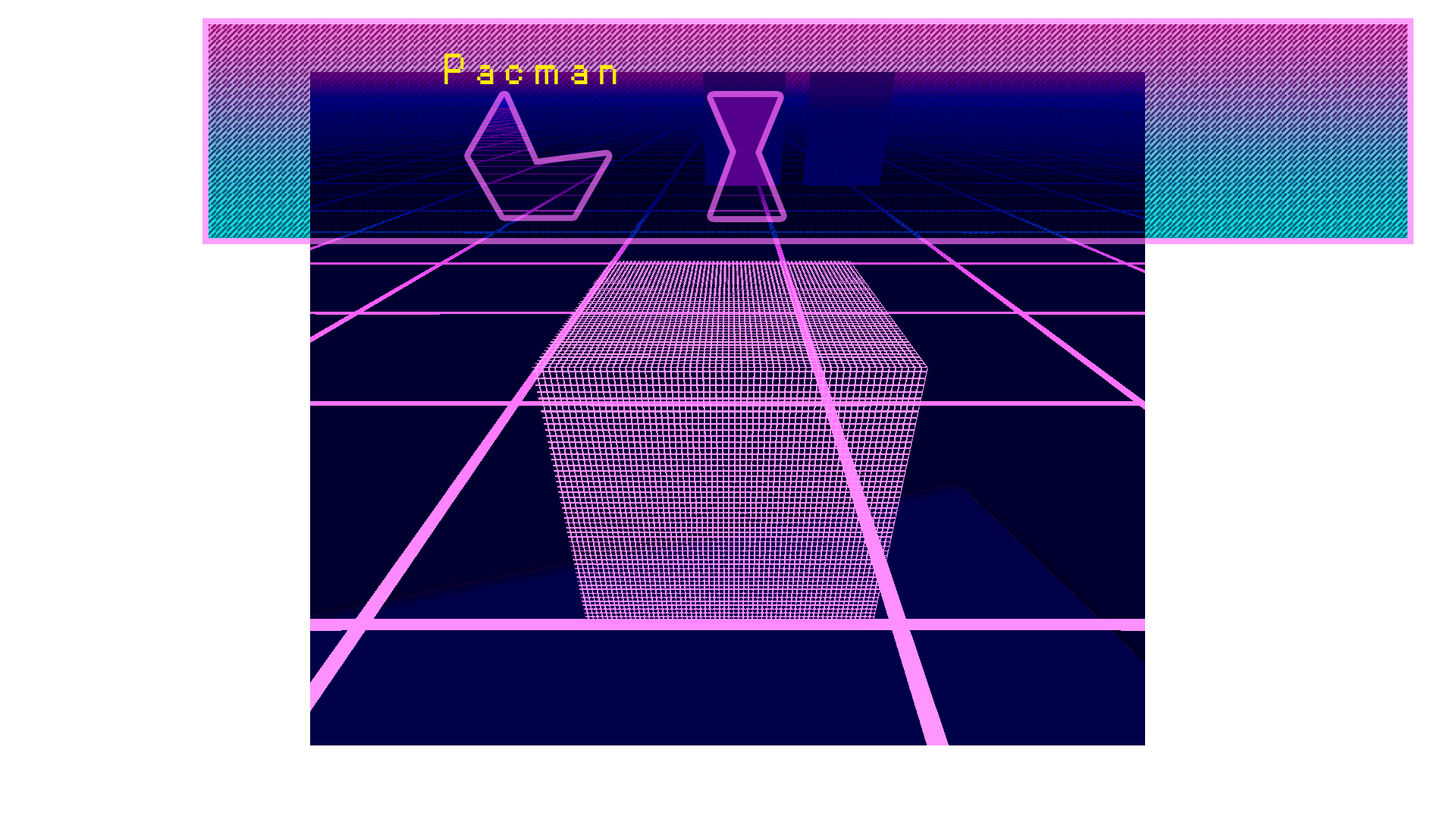
<style>
.page{position:relative;width:1456px;height:819px;background:#ffffff}
.page>*{position:absolute;margin:0}
.t1{font:40.7px "Small Fonts";letter-spacing:0.25em;color:#ffea00}
</style>
<div class="page">
<p class="t1" style="left:444px;top:53px;width:173px;height:31px">Pacman</p>
</div>
